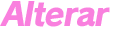
<style>
.page{position:relative;width:116px;height:34px;background:#ffffff}
.page>*{position:absolute;margin:0}
.t1{font:32px "RodinPro-EB";letter-spacing:-0.046em;color:#f980de;font-style:italic}
</style>
<div class="page">
<p class="t1" style="left:0px;top:1px;width:110px;height:26px">Alterar</p>
</div>
